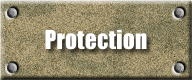
<style>
.page{position:relative;width:192px;height:80px}
.page>*{position:absolute;margin:0}
.t1{font:24px "Impact";color:#ffffff}
</style>
<div class="page">
<p class="t1" style="left:45px;top:30px;width:102px;height:20px">Protection</p>
</div>
